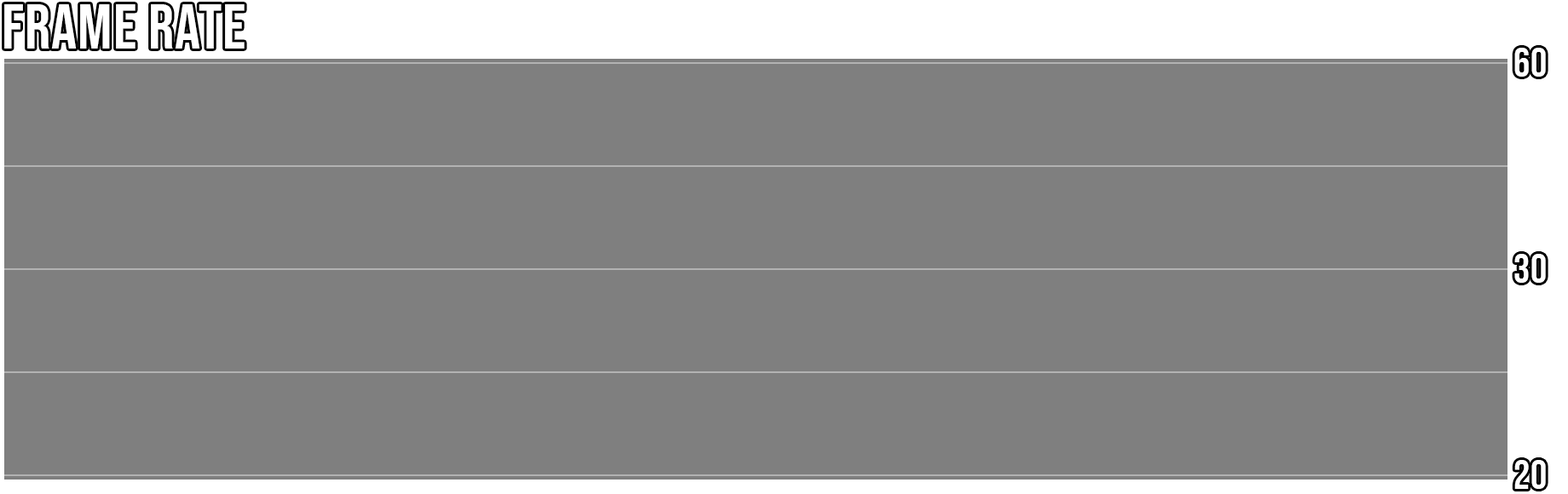
<style>
.page{position:relative;width:1568px;height:494px;background:#7f7f7f}
.page>*{position:absolute;margin:0}
.t1{font:63.9px "BebasNeue-Regular";letter-spacing:0.014em;color:#ffffff}
.t2{font:40.6px "BebasNeue-Regular";letter-spacing:0.014em;color:#ffffff}
</style>
<div class="page">
<p class="t1" style="left:4px;top:4px;width:241px;height:45px">FRAME RATE</p>
<p class="t2" style="left:1514px;top:48px;width:32px;height:29px">60</p>
<p class="t2" style="left:1514px;top:254px;width:32px;height:29px">30</p>
<p class="t2" style="left:1514px;top:460px;width:32px;height:29px">20</p>
</div>
